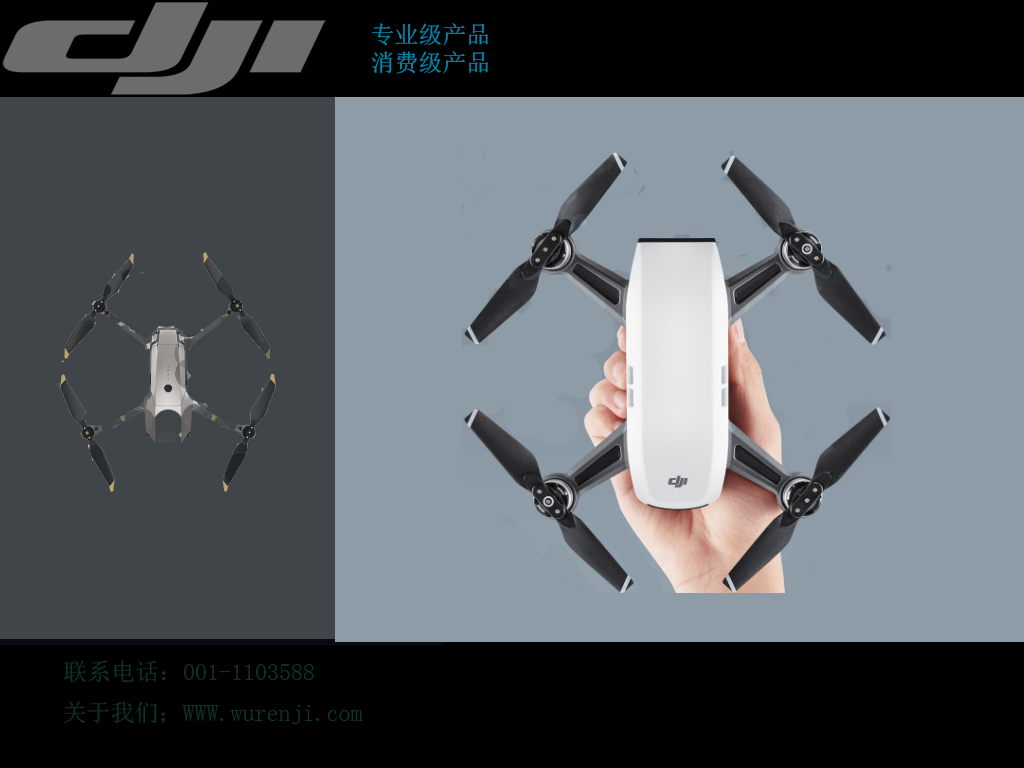
<style>
.page{position:relative;width:1024px;height:768px;background:#8e9ca8}
.page>*{position:absolute;margin:0}
.t1{font:24px "SimSun";color:#008aaf}
.t2{font:24px "SimSun";color:#11322c}
</style>
<div class="page">
<p class="t1" style="left:371px;top:23px;width:118px;height:51px">专业级产品<br>消费级产品</p>
<p class="t2" style="left:64px;top:660px;width:250px;height:23px">联系电话：001-1103588</p>
<p class="t2" style="left:63px;top:701px;width:300px;height:23px">关于我们；WWW.wurenji.com</p>
</div>
